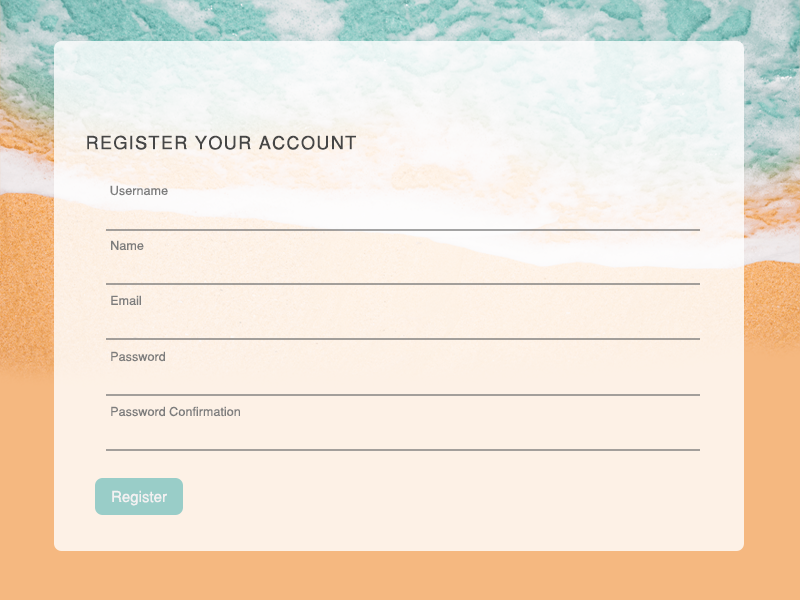
<style>
.page{position:relative;width:800px;height:600px;background:#fdf1e6}
.page>*{position:absolute;margin:0}
.t1{font:18px "Helvetica-Normal";letter-spacing:0.075em;color:#464646}
.t2{font:12px "Helvetica-Normal";color:#7d7d7d;scale:1.05 1}
.t3{font:15px "Helvetica-Normal";color:#f3f1f2}
</style>
<div class="page">
<p class="t1" style="left:87px;top:135px;width:269px;height:15px">REGISTER YOUR ACCOUNT</p>
<p class="t2" style="left:110px;top:185px;width:58px;height:11px">Username</p>
<p class="t2" style="left:111px;top:240px;width:33px;height:11px">Name</p>
<p class="t2" style="left:111px;top:295px;width:30px;height:11px">Email</p>
<p class="t2" style="left:111px;top:351px;width:54px;height:11px">Password</p>
<p class="t2" style="left:111px;top:406px;width:129px;height:11px">Password Confirmation</p>
<p class="t3" style="left:112px;top:490px;width:55px;height:16px">Register</p>
</div>
